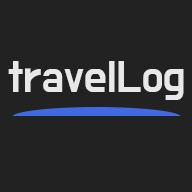
<style>
.page{position:relative;width:192px;height:192px;background:#222222}
.page>*{position:absolute;margin:0}
.t1{font:45px "DoHyeon-Regular";color:#e8e8e8}
</style>
<div class="page">
<p class="t1" style="left:8px;top:61px;width:176px;height:39px">travelLog</p>
</div>
